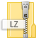
<style>
.page{position:relative;width:40px;height:40px;background:#ffffff}
.page>*{position:absolute;margin:0}
.t1{font:8px "SegoeUI"}
</style>
<div class="page">
<p class="t1" style="left:10px;top:21px;width:9px;height:7px">LZ</p>
</div>
